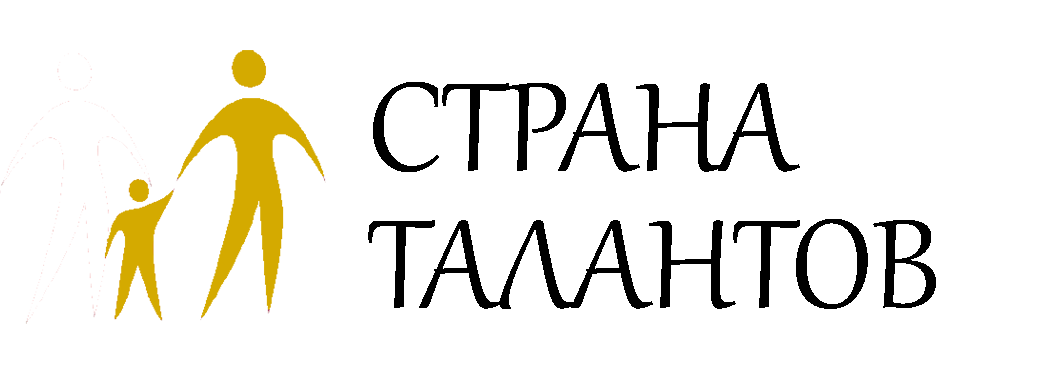
<style>
.page{position:relative;width:1050px;height:381px;background:#ffffff}
.page>*{position:absolute;margin:0}
.t1{font:153.7px/136.9px "Gabriola";color:#000000;text-transform:uppercase}
</style>
<div class="page">
<p class="t1" style="left:368px;top:82px;width:568px;height:227px;text-align:right">Страна <br>талантов</p>
</div>
